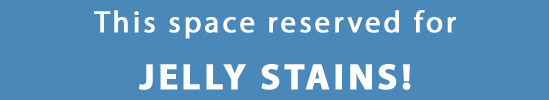
<style>
.page{position:relative;width:549px;height:100px;background:#4a88b9}
.page>*{position:absolute;margin:0}
.t1{font:30.6px/46.2px "MyriadPro-Regular";letter-spacing:0.08em;color:#ffffff;font-weight:bold}
.t2{font:36.6px/57.2px "MyriadPro-Bold";letter-spacing:0.08em;color:#ffffff;font-weight:bold}
</style>
<div class="page">
<p class="t1" style="left:94px;top:10px;width:362px;height:80px;text-align:center">This space reserved for<br><span class="t2">JELLY STAINS!</span></p>
</div>
